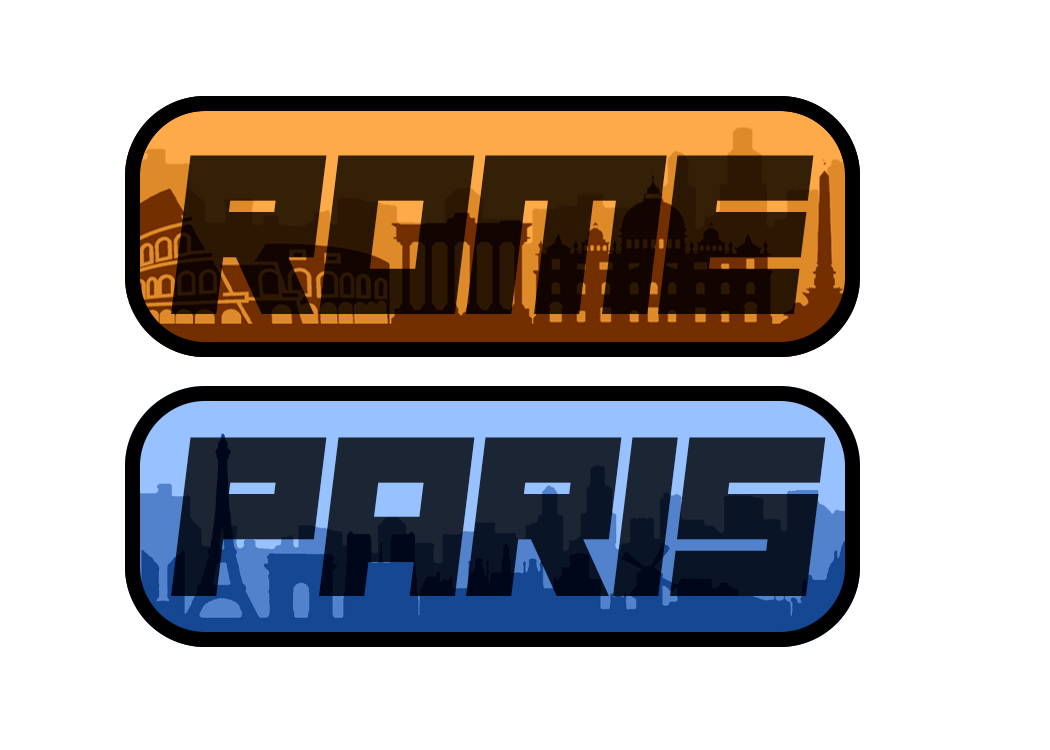
<style>
.page{position:relative;width:1050px;height:750px;background:#ffffff}
.page>*{position:absolute;margin:0}
.t1{font:232px "NauSea";color:#2c1703}
.t2{font:232px "NauSea";color:#1b2534}
</style>
<div class="page">
<p class="t1" style="left:171px;top:155px;width:643px;height:159px">Rome</p>
<p class="t2" style="left:171px;top:437px;width:655px;height:159px">paris</p>
</div>
